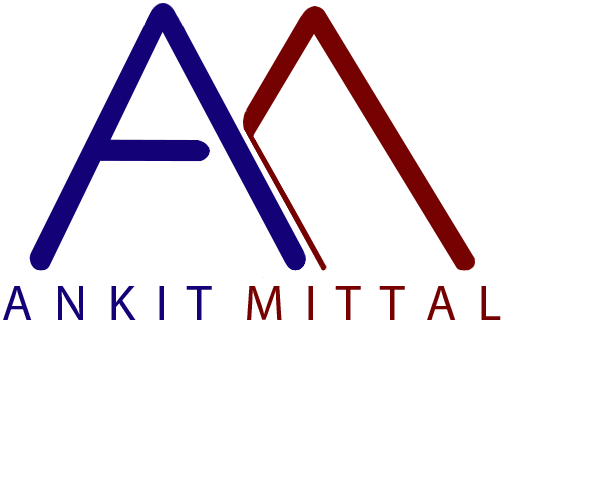
<style>
.page{position:relative;width:600px;height:500px;background:#ffffff}
.page>*{position:absolute;margin:0}
.t1{font:12px "MyriadPro-Regular";color:#750101}
.t2{font:12px "MyriadPro-Regular";color:#130177}
</style>
<div class="page">
<p class="t1" style="left:3px;top:286px;width:498px;height:34px"><span class="t2">A  N  K  I  T   </span>M  I  T  T  A  L</p>
</div>
